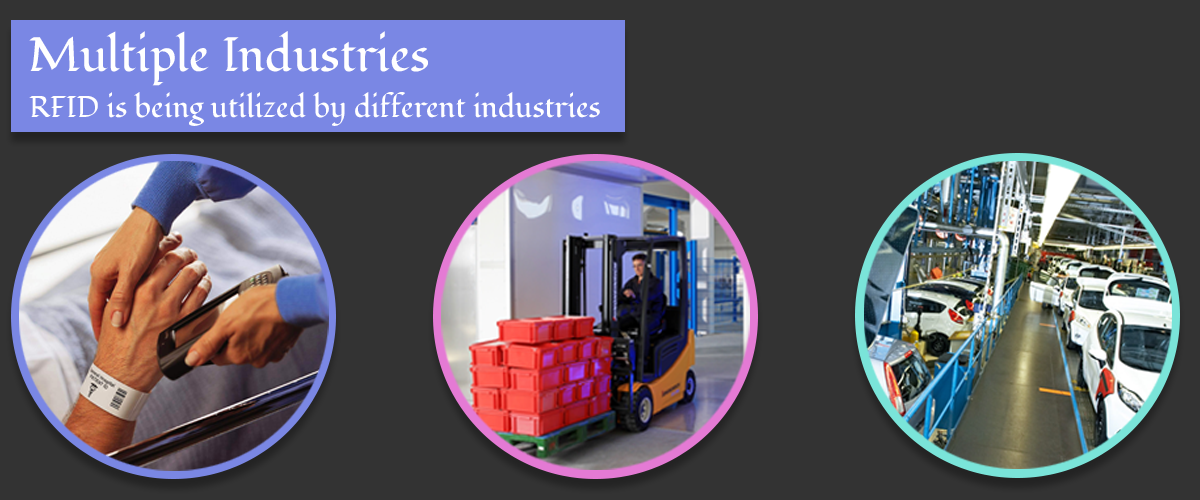
<style>
.page{position:relative;width:1200px;height:500px;background:#333333}
.page>*{position:absolute;margin:0}
.t1{font:48px "Fondamento-Regular";color:#ffffff}
.t2{font:30px "Fondamento-Regular";color:#ffffff}
</style>
<div class="page">
<p class="t1" style="left:29px;top:31px;width:399px;height:55px">Multiple Industries</p>
<p class="t2" style="left:29px;top:92px;width:571px;height:34px">RFID is being utilized by different industries</p>
</div>
